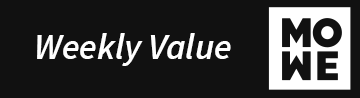
<style>
.page{position:relative;width:360px;height:98px;background:#111111}
.page>*{position:absolute;margin:0}
.t1{font:36.2px "SourceSansPro-SemiboldIt";color:#ffffff}
</style>
<div class="page">
<p class="t1" style="left:37px;top:33px;width:194px;height:33px">Weekly Value</p>
</div>
